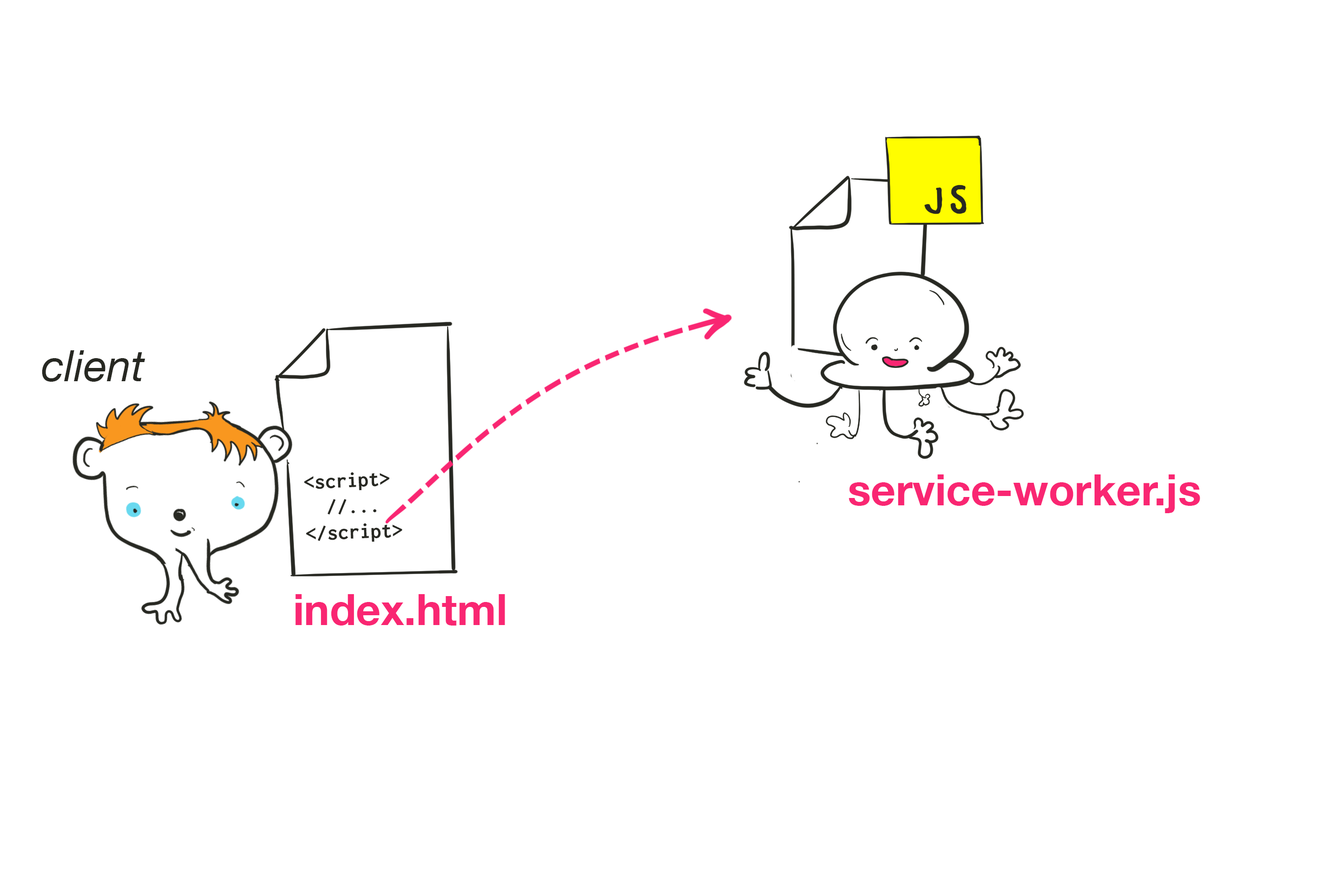
<style>
.page{position:relative;width:1341px;height:889px;background:#ffffff}
.page>*{position:absolute;margin:0}
.t1{font:43.2px "HelveticaNeue-Italic";color:#272822}
.t2{font:21.6px "Inconsolata-Bold";color:#272822}
.t3{font:43.2px "HelveticaNeue-Bold";color:#f92672}
</style>
<div class="page">
<p class="t1" style="left:42px;top:350px;width:103px;height:32px">client</p>
<p class="t2" style="left:304px;top:472px;width:98px;height:70px;rotate:-2deg">&lt;script&gt;<br>  //...<br>&lt;/script&gt;</p>
<p class="t3" style="left:849px;top:475px;width:351px;height:38px">service-worker.js</p>
<p class="t3" style="left:295px;top:594px;width:210px;height:32px">index.html</p>
</div>
